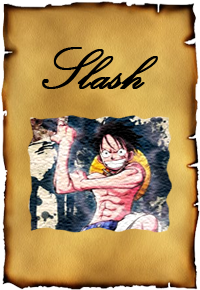
<style>
.page{position:relative;width:200px;height:290px}
.page>*{position:absolute;margin:0}
.t1{font:60px "KunstlerScript";color:#000000;font-weight:bold;scale:0.97 1}
</style>
<div class="page">
<p class="t1" style="left:42px;top:47px;width:116px;height:42px">Slash</p>
</div>
